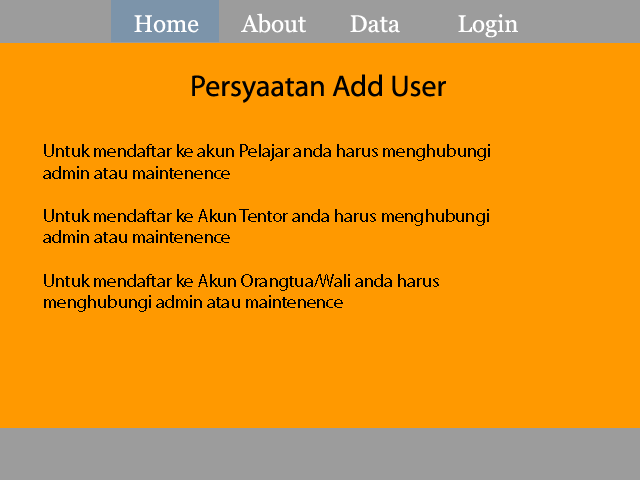
<style>
.page{position:relative;width:640px;height:480px;background:#ff9900}
.page>*{position:absolute;margin:0}
.t1{font:24px "Georgia";color:#ffffff}
.t2{font:30px "MyriadPro-Regular";color:#000000}
.t3{font:18px "MyriadPro-Regular";color:#000000}
</style>
<div class="page">
<p class="t1" style="left:134px;top:13px;width:384px;height:25px">Home  About  Data  Login</p>
<p class="t2" style="left:192px;top:74px;width:254px;height:29px">Persyaatan Add User</p>
<p class="t3" style="left:43px;top:144px;width:447px;height:168px">Untuk mendaftar ke akun Pelajar anda harus menghubungi <br>admin atau maintenence<br><br>Untuk mendaftar ke Akun Tentor anda harus menghubungi<br>admin atau maintenence<br><br>Untuk mendaftar ke Akun Orangtua/Wali anda harus <br>menghubungi admin atau maintenence</p>
</div>
